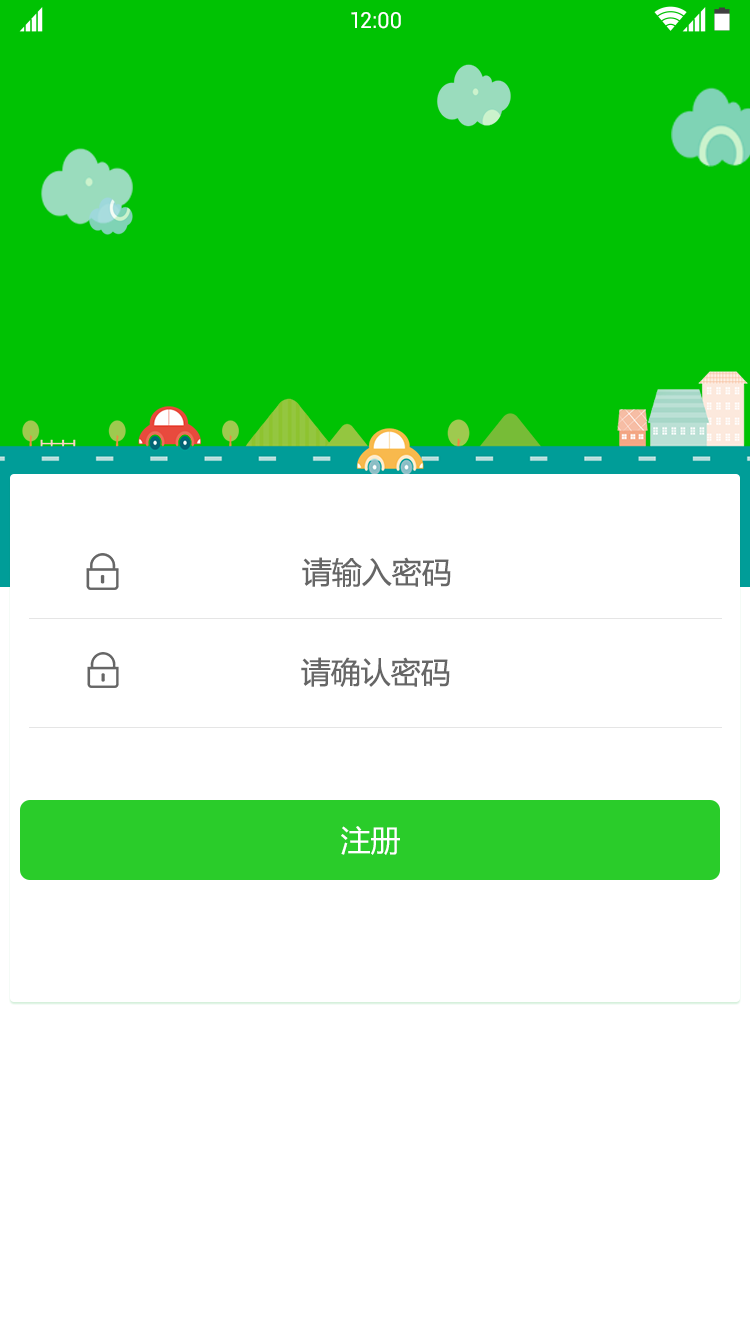
<style>
.page{position:relative;width:750px;height:1336px;background:#ffffff}
.page>*{position:absolute;margin:0}
.t1{font:22px "Roboto-Regular";color:#ffffff}
.t2{font:30px "MicrosoftYaHei";color:#666666;text-transform:uppercase}
.t3{font:30px "MicrosoftYaHei";color:#ffffff}
</style>
<div class="page">
<p class="t1" style="left:351px;top:12px;width:50px;height:17px">12:00</p>
<p class="t2" style="left:302px;top:557px;width:149px;height:30px">请输入密码</p>
<p class="t2" style="left:301px;top:657px;width:149px;height:30px">请确认密码</p>
<p class="t3" style="left:341px;top:826px;width:59px;height:29px">注册</p>
</div>
